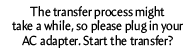
<style>
.page{position:relative;width:196px;height:54px;background:#ffffff}
.page>*{position:absolute;margin:0}
.t1{font:13.2px "Amira-Roman";color:#000000;scale:0.91 1}
</style>
<div class="page">
<p class="t1" style="left:12px;top:6px;width:171px;height:42px;text-align:center">The transfer process might <br>take a while, so please plug in your <br>AC adapter. Start the transfer?</p>
</div>
